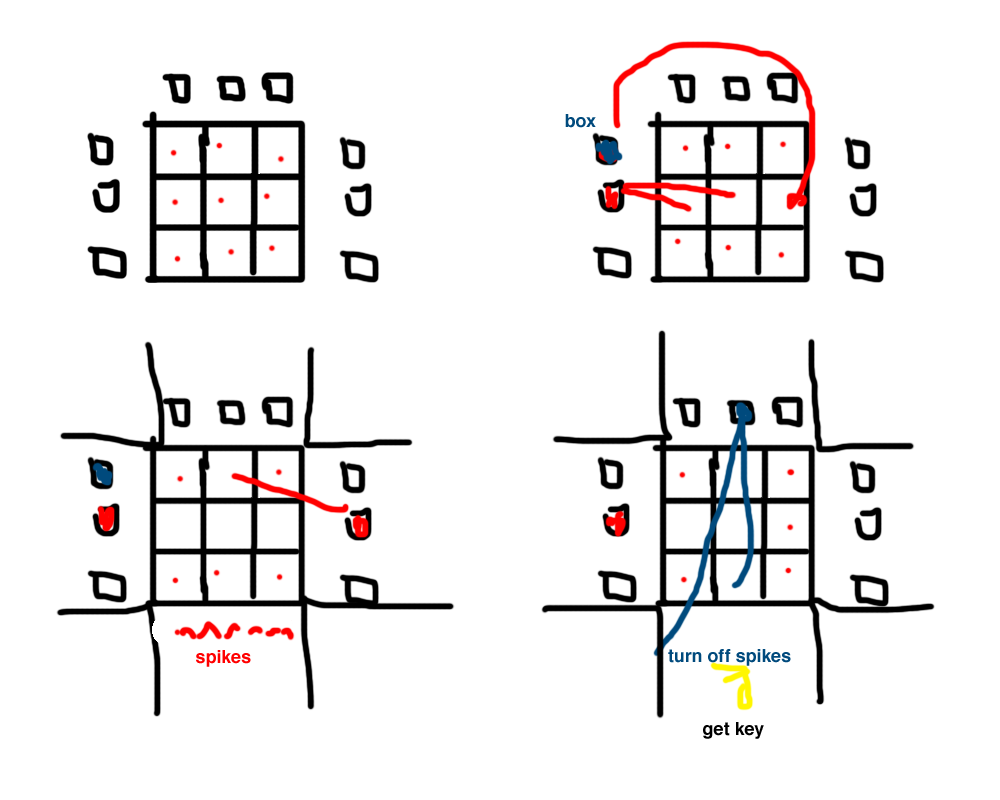
<style>
.page{position:relative;width:1000px;height:800px;background:#ffffff}
.page>*{position:absolute;margin:0}
.t1{font:18px "Helvetica-Bold";color:#004a7d}
.t2{font:18px "Helvetica-Bold";color:#ff0000}
.t3{font:18px "Helvetica-Bold";color:#000000}
</style>
<div class="page">
<p class="t1" style="left:565px;top:114px;width:31px;height:14px">box</p>
<p class="t2" style="left:196px;top:650px;width:55px;height:17px">spikes</p>
<p class="t1" style="left:668px;top:649px;width:123px;height:17px">turn off spikes</p>
<p class="t3" style="left:703px;top:722px;width:61px;height:17px">get key</p>
</div>
